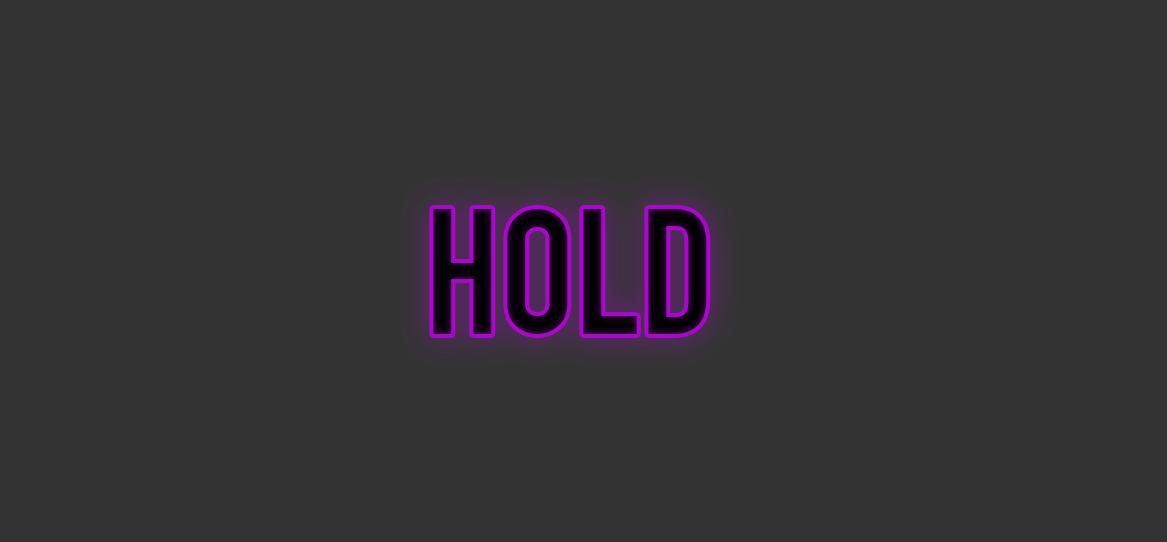
<style>
.page{position:relative;width:1167px;height:542px;background:#333333}
.page>*{position:absolute;margin:0}
.t1{font:175.4px "DINEngschrift";color:#0e0110}
</style>
<div class="page">
<p class="t1" style="left:433px;top:209px;width:274px;height:125px">HOLD</p>
</div>
